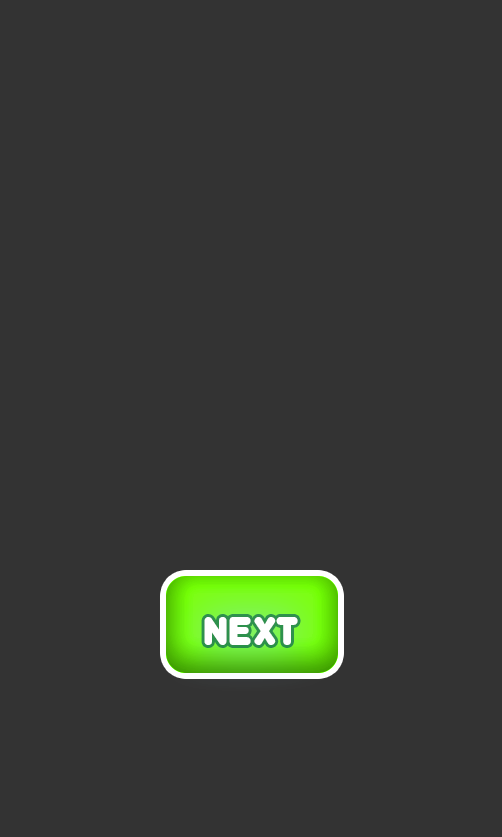
<style>
.page{position:relative;width:502px;height:837px;background:#333333}
.page>*{position:absolute;margin:0}
.t1{font:40.1px "Junegull-Regular";color:#ffffff}
</style>
<div class="page">
<p class="t1" style="left:204px;top:617px;width:94px;height:28px">Next</p>
</div>
